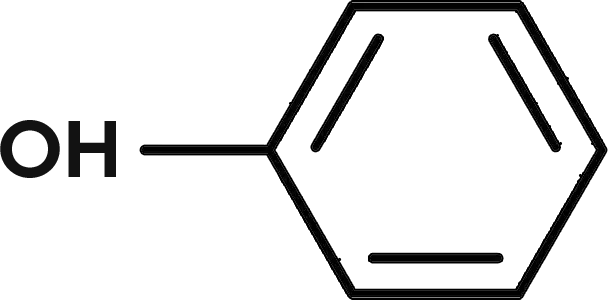
<style>
.page{position:relative;width:608px;height:300px;background:#ffffff}
.page>*{position:absolute;margin:0}
.t1{font:84.3px "CeraPro-Bold";color:#121212}
</style>
<div class="page">
<p class="t1" style="left:0px;top:120px;width:116px;height:58px">OH</p>
</div>
